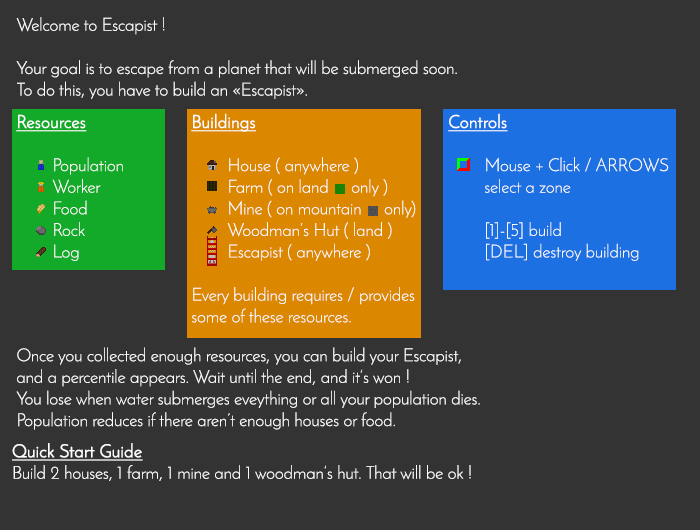
<style>
.page{position:relative;width:700px;height:530px;background:#333333}
.page>*{position:absolute;margin:0}
.t1{font:18px "JosefinSans-Light";color:#ffffff}
.t2{font:18px "JosefinSans-Light";color:#ffffff;font-weight:bold;text-decoration:underline}
</style>
<div class="page">
<p class="t1" style="left:16px;top:17px;width:441px;height:82px">Welcome to Escapist !<br><br>Your goal is to escape from a planet that will be submerged soon.<br>To do this, you have to build an «Escapist».</p>
<p class="t1" style="left:191px;top:113px;width:225px;height:210px"><span class="t2">Buildings<br><br></span> House ( anywhere )<br> Farm ( on land     only )<br> Mine ( on mountain     only)<br> Woodman’s Hut ( land )<br> Escapist ( anywhere )<br><br>Every building requires / provides some of these resources.</p>
<p class="t1" style="left:448px;top:113px;width:221px;height:148px"><span class="t2">Controls</span><br><br> Mouse + Click / ARROWS<br> select a zone<br><br> [1]-[5] build<br> [DEL] destroy building</p>
<p class="t1" style="left:16px;top:114px;width:107px;height:147px"><span class="t2">Resources<br><br></span> Population <br> Worker<br> Food<br> Rock<br> Log</p>
<p class="t1" style="left:16px;top:347px;width:464px;height:83px">Once you collected enough resources, you can build your Escapist, and a percentile appears. Wait until the end, and it’s won !<br>You lose when water submerges eveything or all your population dies. Population reduces if there aren’t enough houses or food.</p>
<p class="t1" style="left:12px;top:443px;width:459px;height:38px"><span class="t2">Quick Start Guide<br></span>Build 2 houses, 1 farm, 1 mine and 1 woodman’s hut. That will be ok !</p>
</div>
